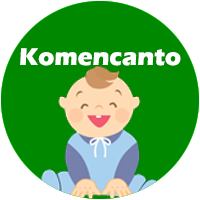
<style>
.page{position:relative;width:200px;height:200px;background:#008800}
.page>*{position:absolute;margin:0}
.t1{font:25px "ErasITC-Bold";color:#ffffff}
</style>
<div class="page">
<p class="t1" style="left:20px;top:48px;width:161px;height:18px">Komencanto</p>
</div>
